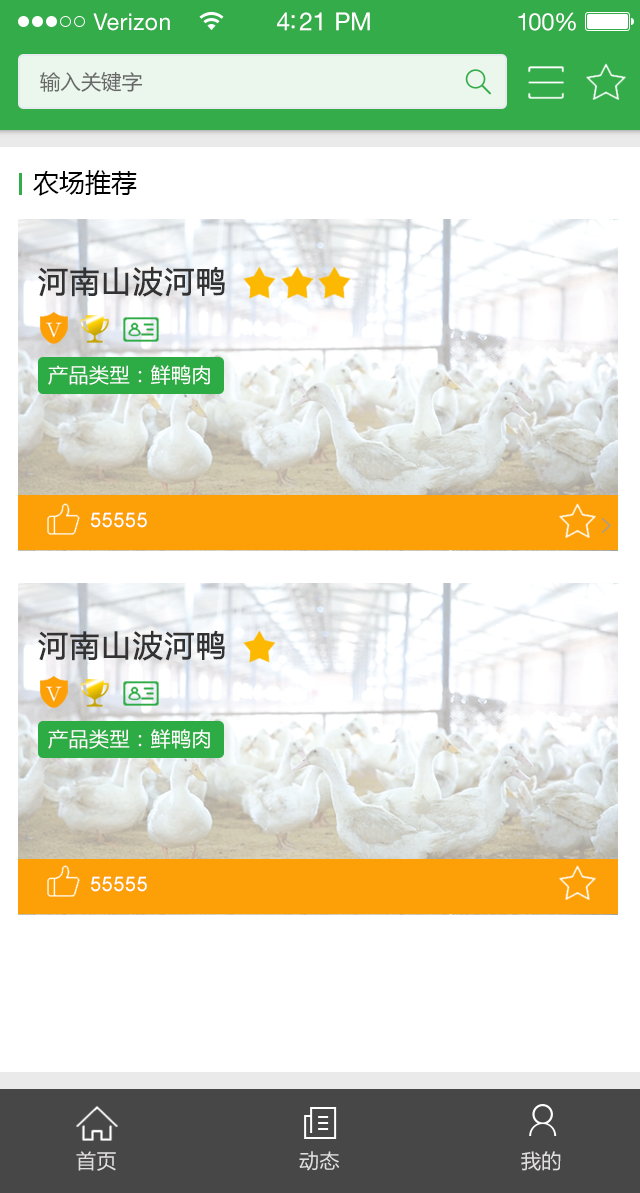
<style>
.page{position:relative;width:640px;height:1193px;background:#ffffff}
.page>*{position:absolute;margin:0}
.t1{font:23px "HelveticaNeueLTStd-Roman";letter-spacing:0.02em;color:#ffffff}
.t2{font:25px "HelveticaNeueLTStd-Roman";letter-spacing:-0.02em;color:#ffffff}
.t3{font:24px "HelveticaNeueLTStd-Roman";letter-spacing:-0.02em;color:#ffffff}
.t4{font:20.3px "MicrosoftYaHei";color:#676767}
.t5{font:26px "MicrosoftYaHei";color:#030303}
.t6{font:30px "MicrosoftYaHei";letter-spacing:0.025em;color:#323232;font-weight:bold}
.t7{font:20px "MicrosoftYaHei";letter-spacing:0.025em;color:#ffffff}
.t8{font:20px "ArialMT";letter-spacing:0.025em;color:#ffffff}
.t9{font:20px "MicrosoftYaHei";letter-spacing:0.025em;color:#e0dede}
</style>
<div class="page">
<p class="t1" style="left:93px;top:13px;width:77px;height:18px">Verizon</p>
<p class="t2" style="left:277px;top:12px;width:93px;height:19px">4:21 PM</p>
<p class="t3" style="left:518px;top:12px;width:58px;height:19px">100%</p>
<p class="t4" style="left:40px;top:71px;width:103px;height:21px">输入关键字</p>
<p class="t5" style="left:33px;top:170px;width:104px;height:26px">农场推荐</p>
<p class="t6" style="left:38px;top:266px;width:187px;height:31px">河南山波河鸭</p>
<p class="t7" style="left:48px;top:365px;width:162px;height:20px">产品类型：鲜鸭肉</p>
<p class="t8" style="left:91px;top:512px;width:56px;height:16px">55555</p>
<p class="t6" style="left:38px;top:630px;width:187px;height:31px">河南山波河鸭</p>
<p class="t7" style="left:48px;top:729px;width:162px;height:20px">产品类型：鲜鸭肉</p>
<p class="t8" style="left:91px;top:876px;width:56px;height:16px">55555</p>
<p class="t9" style="left:76px;top:1151px;width:40px;height:20px">首页</p>
<p class="t9" style="left:299px;top:1151px;width:41px;height:20px">动态</p>
<p class="t9" style="left:521px;top:1151px;width:40px;height:20px">我的</p>
</div>
